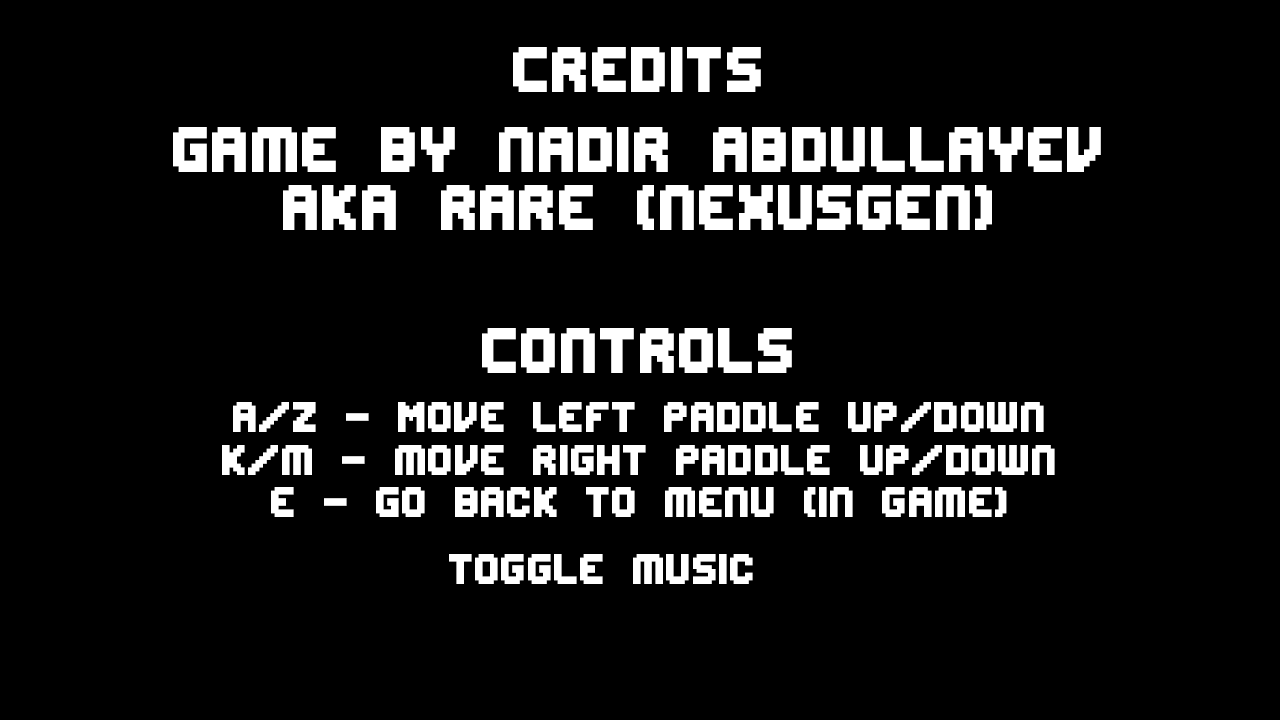
<style>
.page{position:relative;width:1280px;height:720px;background:#000000}
.page>*{position:absolute;margin:0}
.t1{font:72px "Edit Undo -BRK-";color:#ffffff}
.t2{font:48px "Edit Undo -BRK-";color:#ffffff}
</style>
<div class="page">
<p class="t1" style="left:513px;top:47px;width:248px;height:45px">Credits</p>
<p class="t1" style="left:173px;top:127px;width:928px;height:45px">Game by nadir abdullayev</p>
<p class="t1" style="left:283px;top:185px;width:709px;height:45px">Aka rare (nexusgen)</p>
<p class="t1" style="left:482px;top:328px;width:310px;height:45px">Controls</p>
<p class="t2" style="left:233px;top:402px;width:811px;height:30px">A/z - Move left paddle up/down</p>
<p class="t2" style="left:222px;top:445px;width:833px;height:30px">k/m - move right paddle up/down</p>
<p class="t2" style="left:271px;top:487px;width:736px;height:30px">E - Go back to menu (in game)</p>
<p class="t2" style="left:449px;top:554px;width:304px;height:30px">Toggle music</p>
</div>
